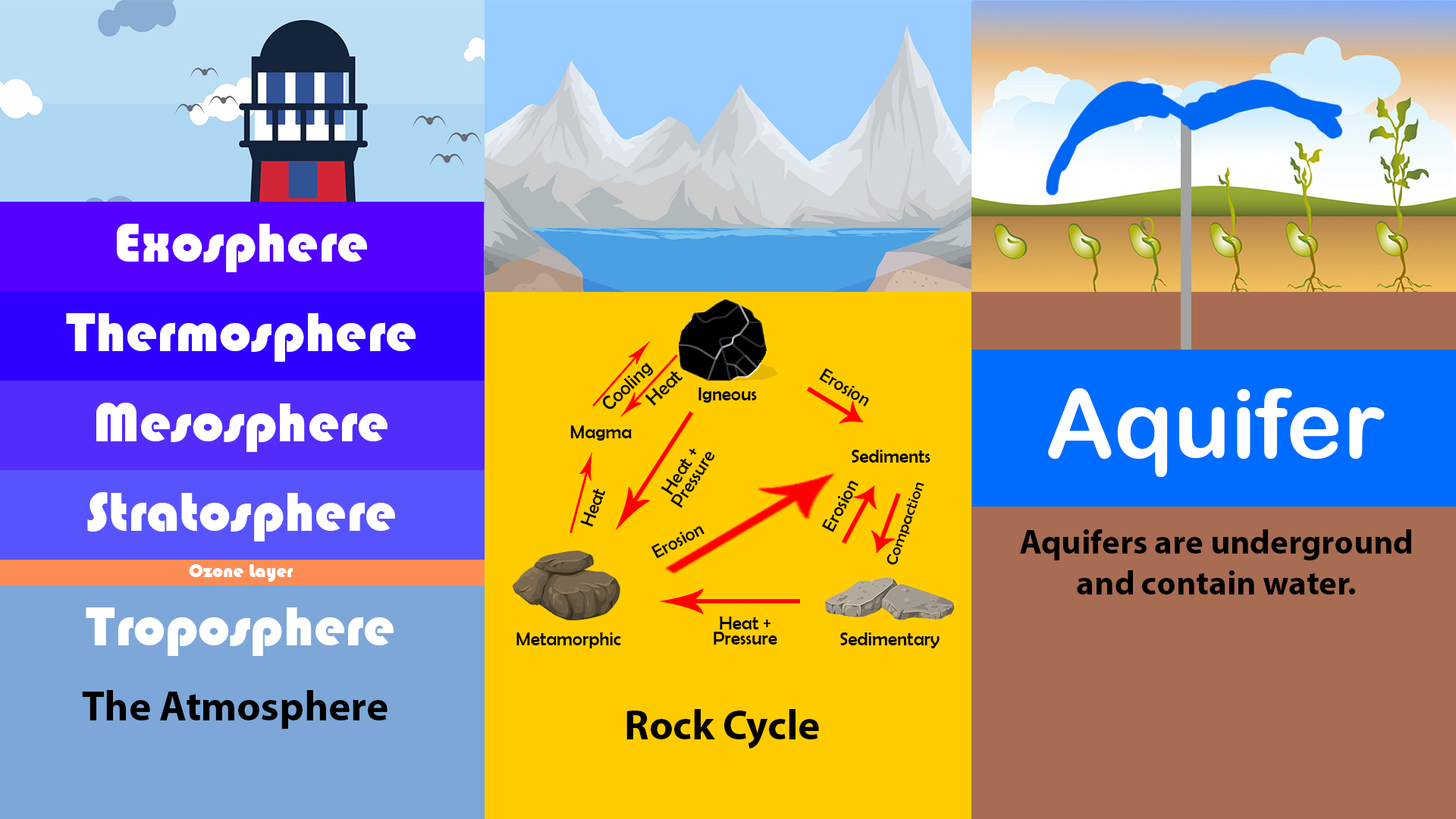
<style>
.page{position:relative;width:1456px;height:819px}
.page>*{position:absolute;margin:0}
.t1{font:56.9px "Bauhaus93";color:#ffffff}
.t2{font:19.8px "BerlinSansFB-Reg";color:#000000}
.t3{font:19px "BerlinSansFB-Reg";color:#000000}
.t4{font:94.8px "ArialRoundedMTBold";color:#ffffff}
.t5{font:19px/15.2px "BerlinSansFB-Reg";color:#000000}
.t6{font:15.6px "BerlinSansFB-Reg";color:#000000;scale:1.11 1}
.t7{font:18.9px "BerlinSansFB-Reg";color:#000000}
.t8{font:34.1px/40.9px "MyriadPro-Bold";color:#000000}
.t9{font:19px "Bauhaus93";color:#ffffff}
.t10{font:41.7px "MyriadPro-Bold";color:#000000}
</style>
<div class="page">
<p class="t1" style="left:117px;top:224px;width:250px;height:48px">Exosphere</p>
<p class="t1" style="left:66px;top:313px;width:350px;height:49px">Thermosphere</p>
<p class="t2" style="left:603px;top:362px;width:51px;height:47px;rotate:-44deg">Cooling</p>
<p class="t2" style="left:645px;top:371px;width:38px;height:35px;rotate:-44deg">Heat</p>
<p class="t3" style="left:819px;top:368px;width:50px;height:38px;rotate:31deg">Erosion</p>
<p class="t3" style="left:698px;top:388px;width:59px;height:15px">Igneous</p>
<p class="t4" style="left:1048px;top:388px;width:337px;height:89px">Aquifer</p>
<p class="t1" style="left:96px;top:403px;width:292px;height:49px">Mesosphere</p>
<p class="t3" style="left:570px;top:425px;width:62px;height:16px">Magma</p>
<p class="t5" style="left:660px;top:448px;width:55px;height:60px;text-align:center;rotate:-57deg">Heat +<br>Pressure</p>
<p class="t3" style="left:852px;top:450px;width:78px;height:13px">Sediments</p>
<p class="t3" style="left:821px;top:481px;width:37px;height:51px;rotate:-62deg">Erosion</p>
<p class="t6" style="left:886px;top:482px;width:38px;height:83px;rotate:-71deg">Compaction</p>
<p class="t1" style="left:87px;top:492px;width:308px;height:49px">Stratosphere</p>
<p class="t7" style="left:580px;top:488px;width:26px;height:39px;rotate:-70deg">Heat</p>
<p class="t3" style="left:651px;top:526px;width:53px;height:33px;rotate:-28deg">Erosion</p>
<p class="t8" style="left:1020px;top:529px;width:392px;height:66px;text-align:center">Aquifers are underground<br>and contain water.</p>
<p class="t9" style="left:189px;top:564px;width:104px;height:18px">Ozone Layer</p>
<p class="t1" style="left:86px;top:607px;width:308px;height:49px">Troposphere</p>
<p class="t5" style="left:714px;top:617px;width:63px;height:28px;text-align:center">Heat +<br>Pressure</p>
<p class="t3" style="left:516px;top:632px;width:105px;height:16px">Metamorphic</p>
<p class="t3" style="left:840px;top:632px;width:100px;height:16px">Sedimentary</p>
<p class="t10" style="left:82px;top:690px;width:306px;height:39px">The Atmosphere</p>
<p class="t10" style="left:626px;top:709px;width:193px;height:39px">Rock Cycle</p>
</div>
